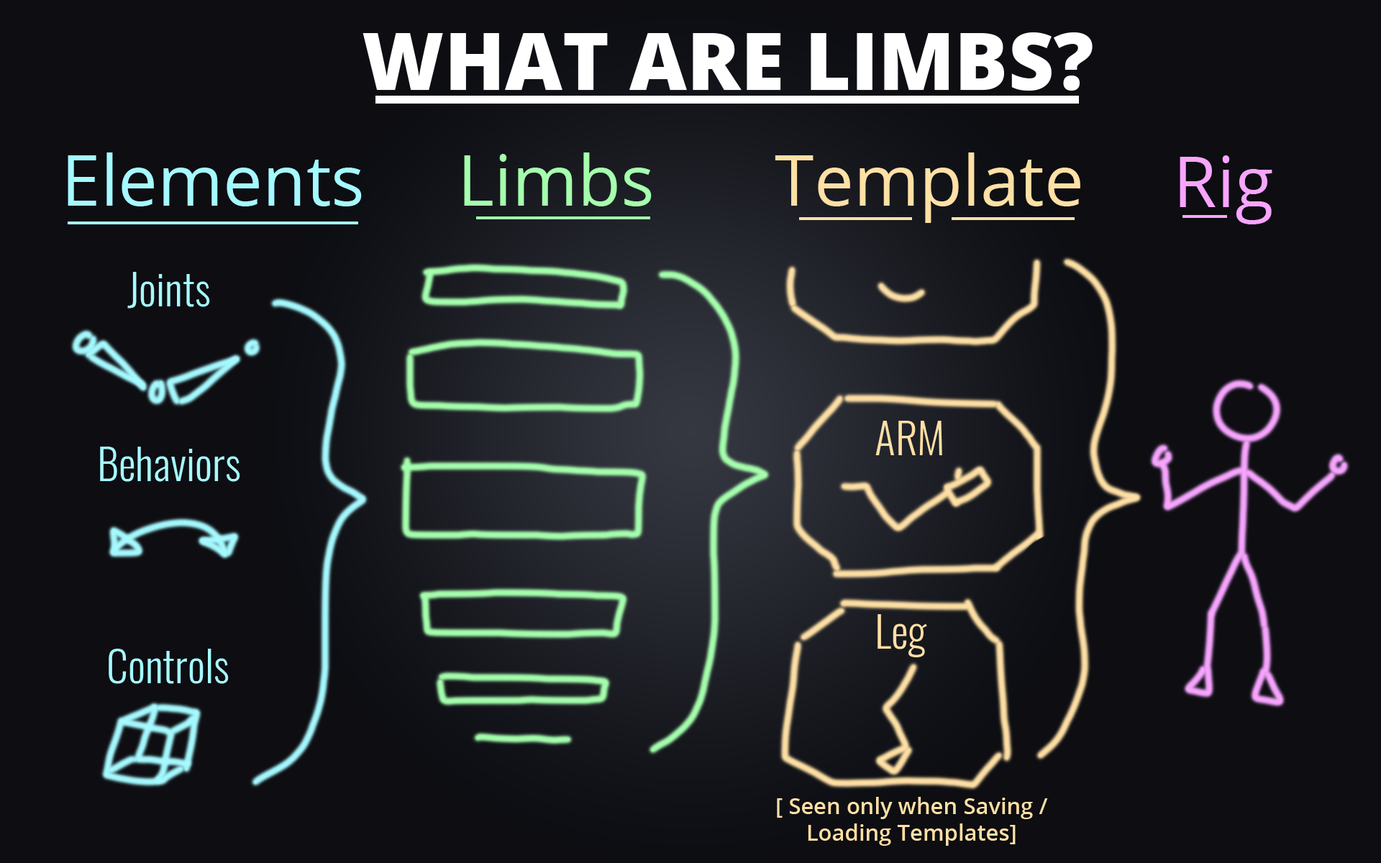
<style>
.page{position:relative;width:1381px;height:863px;background:#0d0d12}
.page>*{position:absolute;margin:0}
.t1{font:79.1px "OpenSans-ExtraBold";color:#ffffff}
.t2{font:70.5px "OpenSans-Regular";color:#a5faff}
.t3{font:70.5px "OpenSans-Regular";color:#a5ffad}
.t4{font:70.5px "OpenSans-Regular";color:#ffe0a5}
.t5{font:70.5px "OpenSans-Regular";color:#f8a5ff}
.t6{font:43.2px "Oswald-Light";color:#a5faff}
.t7{font:43.2px "Oswald-Light";color:#ffe0a5}
.t8{font:22.3px "OpenSans-SemiBold";color:#ffe0a5}
</style>
<div class="page">
<p class="t1" style="left:363px;top:32px;width:730px;height:59px">WHAT ARE LIMBS?</p>
<p class="t2" style="left:68px;top:153px;width:294px;height:53px">Elements</p>
<p class="t3" style="left:464px;top:153px;width:188px;height:53px">Limbs</p>
<p class="t4" style="left:775px;top:153px;width:306px;height:70px">Template</p>
<p class="t5" style="left:1180px;top:155px;width:93px;height:69px">Rig</p>
<p class="t6" style="left:127px;top:272px;width:83px;height:37px">Joints</p>
<p class="t7" style="left:876px;top:421px;width:66px;height:34px">ARM</p>
<p class="t6" style="left:100px;top:447px;width:140px;height:35px">Behaviors</p>
<p class="t7" style="left:878px;top:614px;width:49px;height:44px">Leg</p>
<p class="t6" style="left:109px;top:649px;width:120px;height:35px">Controls</p>
<p class="t8" style="left:777px;top:797px;width:271px;height:49px;text-align:center">[ Seen only when Saving /  <br>Loading Templates]</p>
</div>
